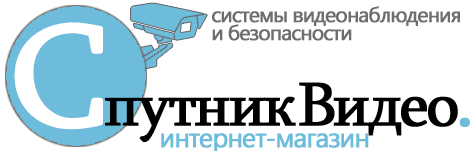
<style>
.page{position:relative;width:473px;height:151px;background:#ffffff}
.page>*{position:absolute;margin:0}
.t1{font:21px/18px "SegoeUI";letter-spacing:-0.06em;color:#6e6e6e;font-weight:bold}
.t2{font:63px "Sylfaen";letter-spacing:-0.06em;color:#000000;font-weight:bold}
.t3{font:146px "Sylfaen";letter-spacing:-0.06em;color:#ffffff;font-weight:bold;scale:1.03 1}
.t4{font:63px "Sylfaen";letter-spacing:-0.08em;color:#000000;font-weight:bold}
.t5{font:71px "Sylfaen";letter-spacing:-0.06em;color:#6dbcdb;font-weight:bold}
</style>
<div class="page">
<p class="t1" style="left:212px;top:6px;width:248px;height:35px">системы видеонаблюдения<br>и безопасности</p>
<p class="t2" style="left:14px;top:22px;width:456px;height:120px"><span class="t3">С</span>путник Виде<span class="t4">о</span><span class="t5">.</span></p>
</div>
